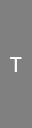
<style>
.page{position:relative;width:32px;height:128px;background:#808080}
.page>*{position:absolute;margin:0}
.t1{font:24px "Calibri";color:#feffff}
</style>
<div class="page">
<p class="t1" style="left:10px;top:57px;width:12px;height:15px">T</p>
</div>
